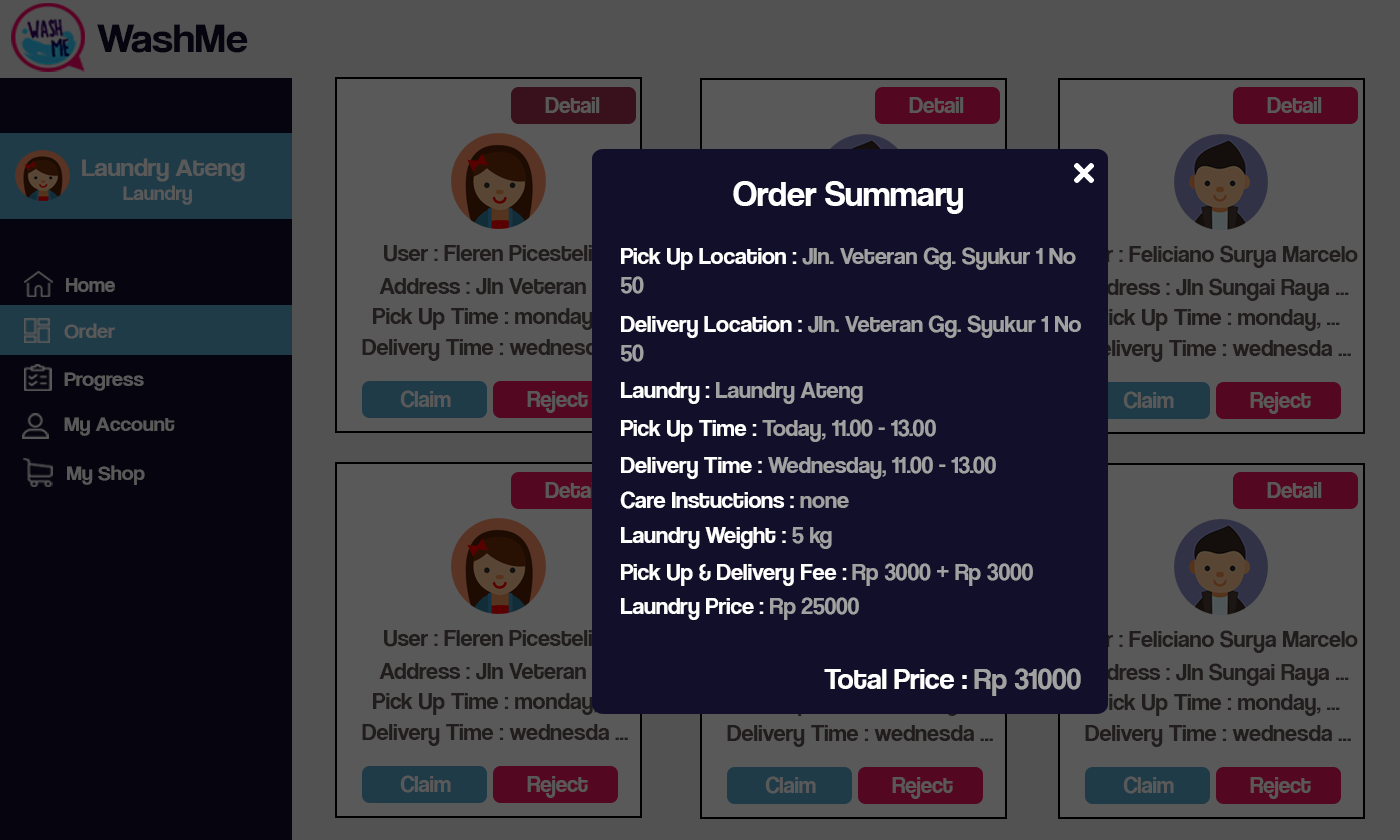
<style>
.page{position:relative;width:1400px;height:840px;background:#595959}
.page>*{position:absolute;margin:0}
.t1{font:42.1px "CoolveticaRg-Regular";color:#06050f;scale:1.05 1}
.t2{font:22.7px "CoolveticaRg-Regular";color:#595959}
.t3{font:25.2px "CoolveticaRg-Regular";color:#595959;scale:1.05 1}
.t4{font:20px "CoolveticaRg-Regular";color:#595959;scale:1.05 1}
.t5{font:36px "CoolveticaRg-Regular";color:#ffffff}
.t6{font:24px "CoolveticaRg-Regular";color:#221d1d}
.t7{font:24px "CoolveticaRg-Regular";color:#a1a1a1}
.t8{font:24px "CoolveticaRg-Regular";color:#ffffff}
.t9{font:21px "CoolveticaRg-Regular";color:#595959}
.t10{font:21px "CoolveticaRg-Regular";color:#595959;scale:1.05 1}
.t11{font:30px "CoolveticaRg-Regular";color:#ffffff}
.t12{font:30px "CoolveticaRg-Regular";color:#a1a1a1}
</style>
<div class="page">
<p class="t1" style="left:97px;top:24px;width:151px;height:29px">WashMe</p>
<p class="t2" style="left:545px;top:97px;width:55px;height:16px">Detail</p>
<p class="t2" style="left:909px;top:97px;width:55px;height:16px">Detail</p>
<p class="t2" style="left:1267px;top:97px;width:55px;height:16px">Detail</p>
<p class="t3" style="left:82px;top:158px;width:163px;height:47px">Laundry Ateng<br><span class="t4">        Laundry</span></p>
<p class="t5" style="left:733px;top:181px;width:230px;height:33px">Order Summary</p>
<p class="t6" style="left:384px;top:245px;width:220px;height:17px">User : Fleren Picestelia</p>
<p class="t6" style="left:1069px;top:245px;width:289px;height:23px">User : Feliciano Surya Marcelo</p>
<p class="t7" style="left:621px;top:247px;width:455px;height:47px"><span class="t8">Pick Up Location : </span>Jln. Veteran Gg. Syukur 1 No 50</p>
<p class="t9" style="left:66px;top:278px;width:49px;height:14px">Home</p>
<p class="t6" style="left:379px;top:278px;width:227px;height:17px">Address : Jln Veteran ...</p>
<p class="t6" style="left:1079px;top:278px;width:270px;height:23px">Address : Jln Sungai Raya ...</p>
<p class="t6" style="left:373px;top:308px;width:244px;height:22px">Pick Up Time : monday, ...</p>
<p class="t7" style="left:621px;top:315px;width:460px;height:47px"><span class="t8">Delivery Location : </span>Jln. Veteran Gg. Syukur 1 No 50</p>
<p class="t6" style="left:1096px;top:309px;width:244px;height:22px">Pick Up Time : monday, ...</p>
<p class="t10" style="left:64px;top:323px;width:51px;height:16px">Order</p>
<p class="t6" style="left:362px;top:339px;width:266px;height:22px">Delivery Time : wednesda ...</p>
<p class="t6" style="left:1085px;top:340px;width:266px;height:22px">Delivery Time : wednesda ...</p>
<p class="t10" style="left:64px;top:372px;width:80px;height:19px">Progress</p>
<p class="t2" style="left:400px;top:390px;width:51px;height:18px">Claim</p>
<p class="t7" style="left:621px;top:382px;width:242px;height:22px"><span class="t8">Laundry : </span>Laundry Ateng</p>
<p class="t2" style="left:527px;top:391px;width:61px;height:22px">Reject</p>
<p class="t2" style="left:1123px;top:391px;width:51px;height:18px">Claim</p>
<p class="t2" style="left:1250px;top:392px;width:61px;height:22px">Reject</p>
<p class="t10" style="left:64px;top:417px;width:111px;height:19px">My Account</p>
<p class="t7" style="left:621px;top:419px;width:315px;height:23px"><span class="t8">Pick Up Time : </span>Today, 11.00 - 13.00</p>
<p class="t7" style="left:621px;top:456px;width:375px;height:23px"><span class="t8">Delivery Time : </span>Wednesday, 11.00 - 13.00</p>
<p class="t10" style="left:67px;top:465px;width:78px;height:20px">My Shop</p>
<p class="t2" style="left:545px;top:482px;width:55px;height:16px">Detail</p>
<p class="t2" style="left:1267px;top:482px;width:55px;height:16px">Detail</p>
<p class="t8" style="left:620px;top:491px;width:229px;height:18px">Care Instuctions : <span class="t7">none</span></p>
<p class="t8" style="left:621px;top:527px;width:211px;height:22px">Laundry Weight : <span class="t7">5 kg</span></p>
<p class="t8" style="left:621px;top:563px;width:412px;height:23px">Pick Up &amp; Delivery Fee : <span class="t7">Rp 3000 + Rp 3000</span></p>
<p class="t8" style="left:621px;top:597px;width:238px;height:23px">Laundry Price : <span class="t7">Rp 25000</span></p>
<p class="t6" style="left:384px;top:630px;width:220px;height:17px">User : Fleren Picestelia</p>
<p class="t6" style="left:1069px;top:630px;width:289px;height:23px">User : Feliciano Surya Marcelo</p>
<p class="t6" style="left:379px;top:663px;width:227px;height:17px">Address : Jln Veteran ...</p>
<p class="t6" style="left:1079px;top:663px;width:270px;height:23px">Address : Jln Sungai Raya ...</p>
<p class="t11" style="left:824px;top:668px;width:257px;height:28px">Total Price : <span class="t12">Rp 31000</span></p>
<p class="t6" style="left:373px;top:693px;width:244px;height:22px">Pick Up Time : monday, ...</p>
<p class="t6" style="left:1096px;top:694px;width:244px;height:22px">Pick Up Time : monday, ...</p>
<p class="t6" style="left:362px;top:724px;width:266px;height:22px">Delivery Time : wednesda ...</p>
<p class="t6" style="left:727px;top:725px;width:266px;height:22px">Delivery Time : wednesda ...</p>
<p class="t6" style="left:1085px;top:725px;width:266px;height:22px">Delivery Time : wednesda ...</p>
<p class="t2" style="left:400px;top:775px;width:51px;height:18px">Claim</p>
<p class="t2" style="left:527px;top:776px;width:61px;height:22px">Reject</p>
<p class="t2" style="left:765px;top:776px;width:51px;height:18px">Claim</p>
<p class="t2" style="left:892px;top:777px;width:61px;height:22px">Reject</p>
<p class="t2" style="left:1123px;top:776px;width:51px;height:18px">Claim</p>
<p class="t2" style="left:1250px;top:777px;width:61px;height:22px">Reject</p>
</div>
